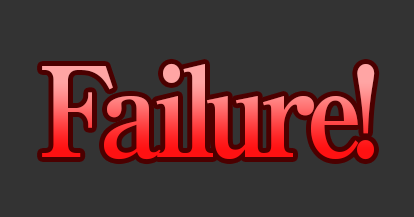
<style>
.page{position:relative;width:414px;height:217px;background:#333333}
.page>*{position:absolute;margin:0}
.t1{font:125px "RyuminPro-ExBold";letter-spacing:-0.08em;scale:0.9 1}
</style>
<div class="page">
<p class="t1" style="left:42px;top:63px;width:333px;height:97px">Failure!</p>
</div>
